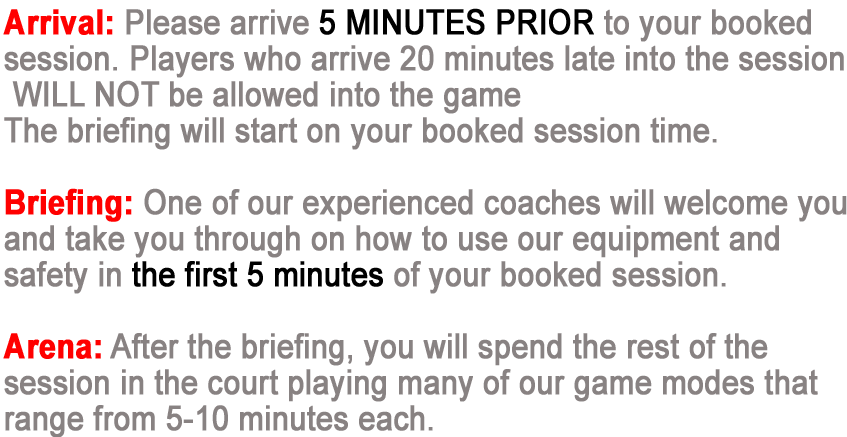
<style>
.page{position:relative;width:847px;height:437px;background:#ffffff}
.page>*{position:absolute;margin:0}
.t1{font:34.5px/36px "ArialMT";color:#888282;font-weight:bold;scale:0.87 1}
.t2{font:34.5px/36px "Arial-BoldMT";color:#ff0000;font-weight:bold;scale:0.87 1}
.t3{font:34.5px/36px "ArialMT";color:#000000;font-weight:bold;scale:0.87 1}
</style>
<div class="page">
<p class="t1" style="left:3px;top:8px;width:844px;height:430px"><span class="t2">Arrival:</span> Please arrive <span class="t3">5 MINUTES PRIOR</span> to your booked<br>session. Players who arrive 20 minutes late into the session<br> WILL NOT be allowed into the game<br>The briefing will start on your booked session time.<br><br><span class="t2">Briefing:</span> One of our experienced coaches will welcome you<br>and take you through on how to use our equipment and <br>safety in <span class="t3">the first 5 minutes</span> of your booked session.<br><br><span class="t2">Arena:</span> After the briefing, you will spend the rest of the<br>session in the court playing many of our game modes that<br>range from 5-10 minutes each.</p>
</div>
